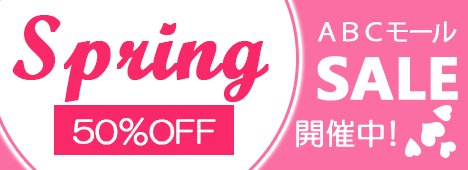
<style>
.page{position:relative;width:468px;height:170px;background:#ffffff}
.page>*{position:absolute;margin:0}
.t1{font:90px "ScriptMTBold";color:#f92868;font-weight:bold}
.t2{font:25px "KozGoPr6N-Regular";letter-spacing:-0.085em;color:#ffffff;font-weight:bold}
.t3{font:60px "MicrosoftPhagsPa-Bold";color:#ffffff;font-weight:bold}
.t4{font:30px "HGMaruGothicMPRO";color:#ffffff;font-weight:bold}
.t5{font:30px "HGMaruGothicMPRO";letter-spacing:-0.3em;color:#ffffff;font-weight:bold}
</style>
<div class="page">
<p class="t1" style="left:12px;top:15px;width:257px;height:87px">Spring</p>
<p class="t2" style="left:318px;top:21px;width:139px;height:22px">ＡＢＣモール</p>
<p class="t3" style="left:317px;top:56px;width:141px;height:45px">SALE</p>
<p class="t4" style="left:73px;top:117px;width:143px;height:29px">50％OFF</p>
<p class="t4" style="left:296px;top:119px;width:100px;height:29px">開催<span class="t5">中！</span></p>
</div>
